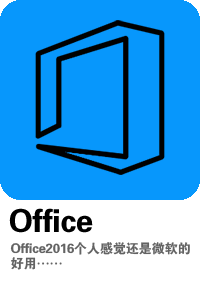
<style>
.page{position:relative;width:200px;height:282px;background:#0797fc}
.page>*{position:absolute;margin:0}
.t1{font:31.5px "Jdahei";letter-spacing:-0.02em;color:#000000}
.t2{font:13.2px/15px "Jdahei";letter-spacing:-0.02em;color:#636363}
</style>
<div class="page">
<p class="t1" style="left:9px;top:208px;width:84px;height:25px">Office</p>
<p class="t2" style="left:10px;top:242px;width:180px;height:28px">Office2016个人感觉还是微软的<br>好用……</p>
</div>
